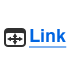
<style>
.page{position:relative;width:75px;height:75px;background:#ffffff}
.page>*{position:absolute;margin:0}
.t1{font:18px "Helvetica-Bold";color:#0065e1;text-decoration:underline}
</style>
<div class="page">
<p class="t1" style="left:29px;top:29px;width:38px;height:19px">Link</p>
</div>
